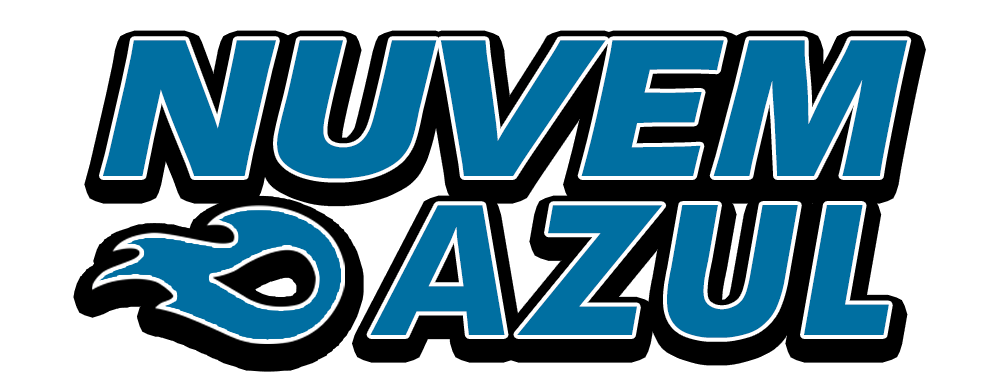
<style>
.page{position:relative;width:1000px;height:390px;background:#ffffff}
.page>*{position:absolute;margin:0}
.t1{font:203.7px/158.3px "ErasITC-Bold";color:#006fa1;text-transform:uppercase;font-style:italic}
.t2{font:203.7px/158.3px "Futura-Bold";color:#006fa1;text-transform:uppercase;font-style:italic}
</style>
<div class="page">
<p class="t1" style="left:103px;top:40px;width:805px;height:298px;text-align:right">NUVEM<span class="t2"><br>azul</span></p>
</div>
